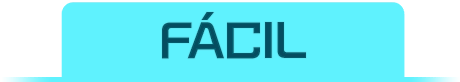
<style>
.page{position:relative;width:460px;height:82px;background:#5ff2fe}
.page>*{position:absolute;margin:0}
.t1{font:41.3px "KafuTechnoStd-HV";letter-spacing:0.012em;color:#054d60}
</style>
<div class="page">
<p class="t1" style="left:162px;top:12px;width:144px;height:47px">FÁCIL</p>
</div>
